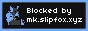
<style>
.page{position:relative;width:88px;height:31px;background:#111111}
.page>*{position:absolute;margin:0}
.t1{font:7.5px "04b03";color:#ffffff}
</style>
<div class="page">
<p class="t1" style="left:27px;top:8px;width:55px;height:16px">Blocked by<br>mk.slipfox.xyz</p>
</div>
